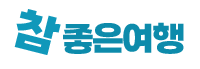
<style>
.page{position:relative;width:200px;height:69px;background:#ffffff}
.page>*{position:absolute;margin:0}
.t1{font:48px "GangwonEduPowerExtraBold";color:#1098ba}
.t2{font:36px "GangwonEduPowerExtraBold";letter-spacing:-0.05em;color:#0d8bab}
</style>
<div class="page">
<p class="t1" style="left:14px;top:9px;width:47px;height:46px;rotate:14deg">참</p>
<p class="t2" style="left:63px;top:22px;width:121px;height:32px">좋은여행</p>
</div>
